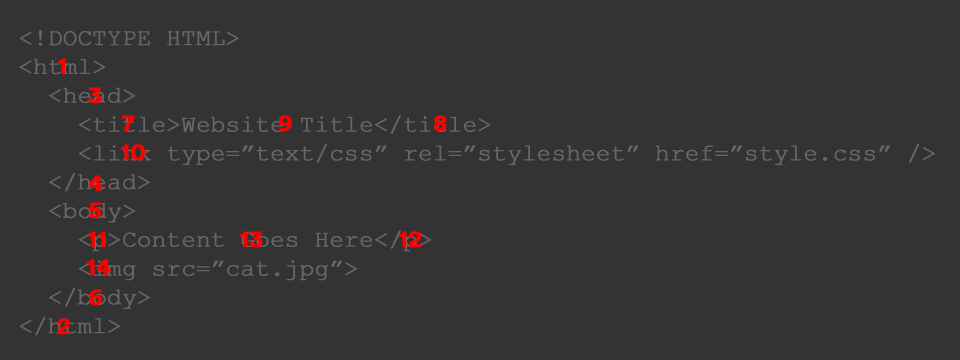
<style>
.page{position:relative;width:960px;height:360px;background:#333333}
.page>*{position:absolute;margin:0}
.t1{font:24px "CourierNewPSMT";letter-spacing:-0.01em;color:#676767;font-weight:bold}
.t2{font:24px "CircularStd-Bold";letter-spacing:-0.01em;color:#ff0000;font-weight:bold}
</style>
<div class="page">
<p class="t1" style="left:19px;top:30px;width:917px;height:306px">&lt;!DOCTYPE HTML&gt;<br>&lt;html&gt;<br>  &lt;head&gt;<br>    &lt;title&gt;Website Title&lt;/title&gt;<br>    &lt;link type=”text/css” rel=”stylesheet” href=”style.css” /&gt;<br>  &lt;/head&gt;<br>  &lt;body&gt;<br>    &lt;p&gt;Content Goes Here&lt;/p&gt;<br>    &lt;img src=”cat.jpg”&gt;<br>  &lt;/body&gt;<br>&lt;/html&gt;</p>
<p class="t2" style="left:57px;top:58px;width:9px;height:17px">1</p>
<p class="t2" style="left:88px;top:87px;width:14px;height:17px">3</p>
<p class="t2" style="left:122px;top:115px;width:13px;height:17px">7</p>
<p class="t2" style="left:278px;top:115px;width:14px;height:17px">9</p>
<p class="t2" style="left:434px;top:115px;width:13px;height:17px">8</p>
<p class="t2" style="left:120px;top:144px;width:25px;height:17px">10</p>
<p class="t2" style="left:89px;top:175px;width:14px;height:17px">4</p>
<p class="t2" style="left:88px;top:202px;width:14px;height:17px">5</p>
<p class="t2" style="left:87px;top:231px;width:19px;height:17px">11</p>
<p class="t2" style="left:239px;top:231px;width:24px;height:17px">13</p>
<p class="t2" style="left:398px;top:231px;width:24px;height:17px">12</p>
<p class="t2" style="left:86px;top:259px;width:25px;height:17px">14</p>
<p class="t2" style="left:89px;top:289px;width:13px;height:17px">6</p>
<p class="t2" style="left:57px;top:318px;width:13px;height:17px">2</p>
</div>
